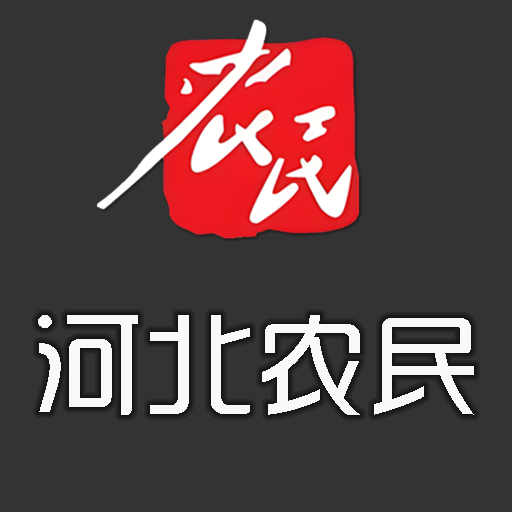
<style>
.page{position:relative;width:512px;height:512px;background:#333333}
.page>*{position:absolute;margin:0}
.t1{font:110px "SJyunlv";letter-spacing:0.02em;color:#faf9f9}
</style>
<div class="page">
<p class="t1" style="left:38px;top:315px;width:436px;height:100px">河北农民</p>
</div>
